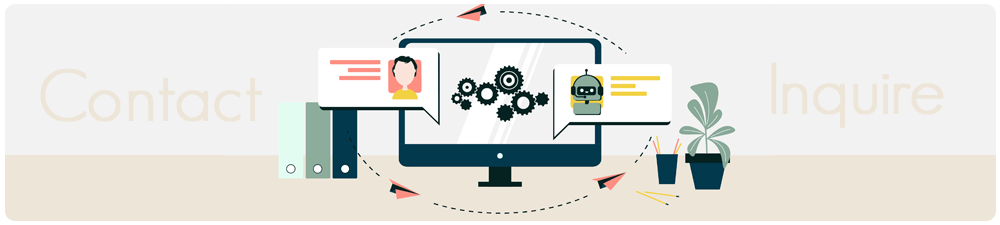
<style>
.page{position:relative;width:1000px;height:225px;background:#f2f2f2}
.page>*{position:absolute;margin:0}
.t1{font:70.6px "GeosansLight";color:#ede5d8;font-weight:bold}
</style>
<div class="page">
<p class="t1" style="left:771px;top:62px;width:173px;height:66px">Inquire</p>
<p class="t1" style="left:40px;top:68px;width:222px;height:54px">Contact</p>
</div>
